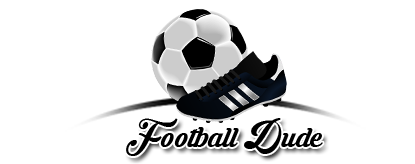
<style>
.page{position:relative;width:415px;height:164px;background:#ffffff}
.page>*{position:absolute;margin:0}
.t1{font:35.1px "KrinkesDecorPERSONALUSE";color:#000000}
</style>
<div class="page">
<p class="t1" style="left:126px;top:118px;width:197px;height:38px">Football Dude</p>
</div>
